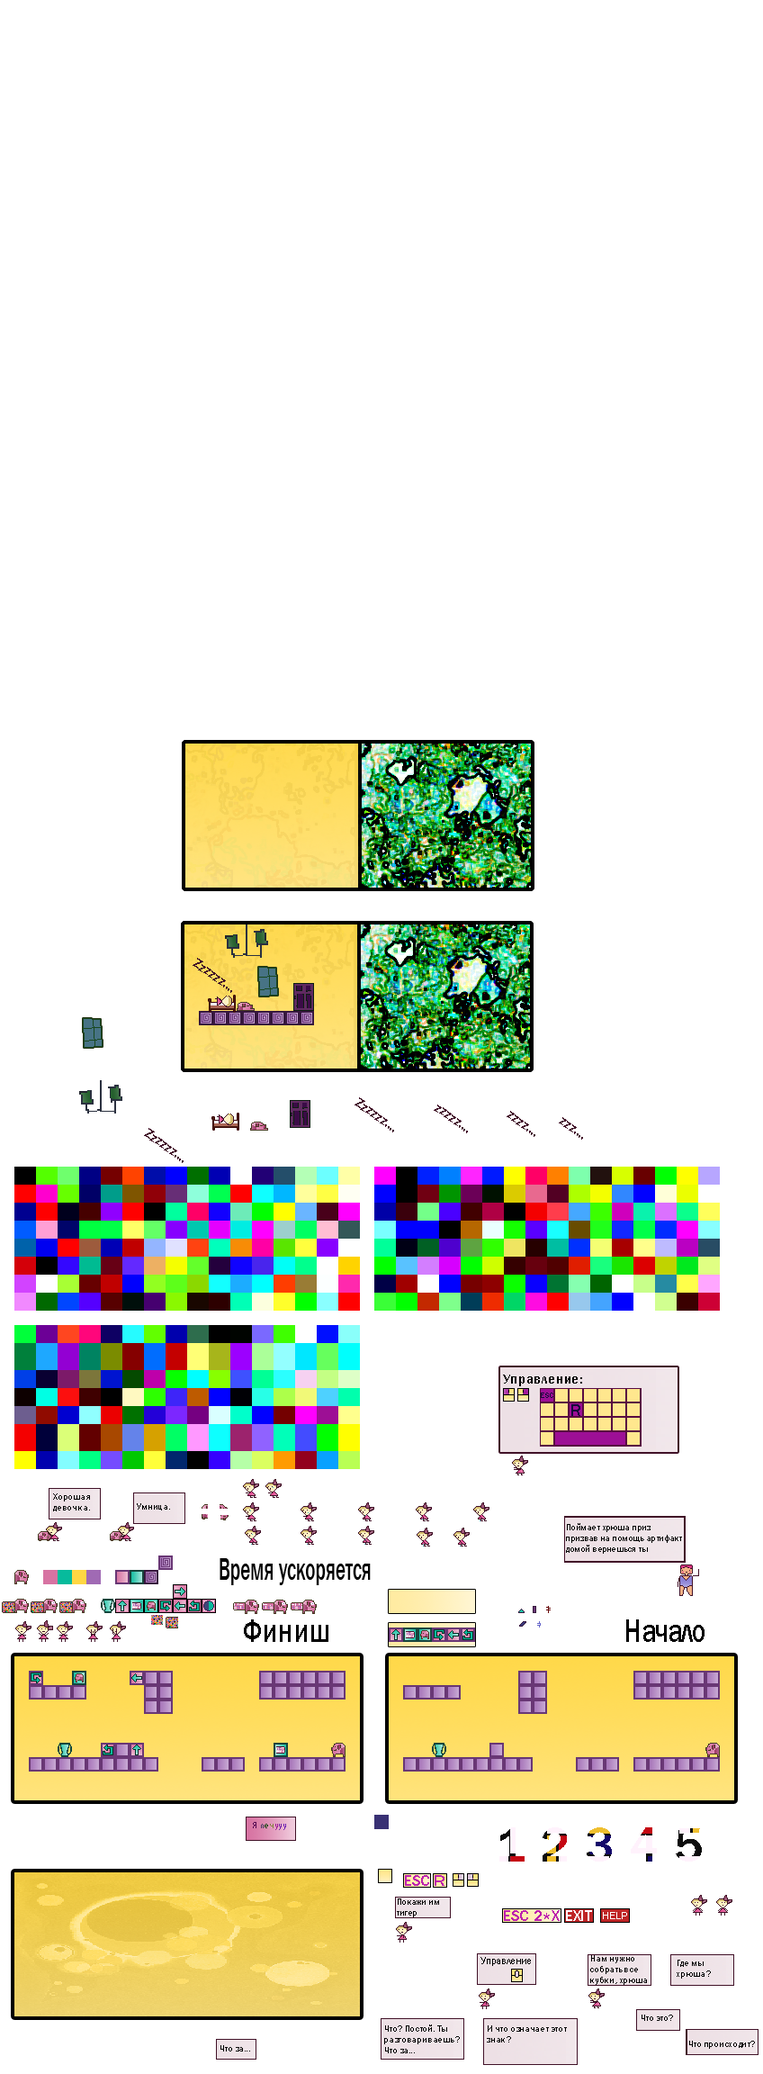
<style>
.page{position:relative;width:763px;height:2074px;background:#ffffff}
.page>*{position:absolute;margin:0}
.t1{font:12.7px "FranklinGothic-Medium";color:#411228}
.t2{font:13.7px "FranklinGothic-Medium";color:#000000}
.t3{font:9px "FranklinGothic-Medium";color:#000000}
.t4{font:31.6px "FranklinGothic-Medium";color:#000000;scale:0.6 1}
.t5{font:32.9px "FranklinGothic-Medium";color:#000000;scale:0.8 1}
.t6{font:9px "FranklinGothic-Medium";color:#550b51}
.t7{font:9px "FranklinGothic-Medium";color:#463961}
.t8{font:9px "FranklinGothic-Medium";color:#17490f}
.t9{font:9px "FranklinGothic-Medium";color:#858440}
.t10{font:9px "FranklinGothic-Medium";color:#a01c98}
.t11{font:9px "FranklinGothic-Medium";color:#7223a9}
.t12{font:9px "FranklinGothic-Medium";color:#6c20b3}
.t13{font:10.4px "FranklinGothic-Medium";color:#000000}
</style>
<div class="page">
<p class="t1" style="left:193px;top:958px;width:39px;height:35px;rotate:35deg">Zzzzzz....</p>
<p class="t1" style="left:144px;top:1128px;width:40px;height:35px;rotate:35deg">Zzzzzz....</p>
<p class="t2" style="left:503px;top:1374px;width:79px;height:12px">Управление:</p>
<p class="t3" style="left:53px;top:1493px;width:37px;height:18px">Хорошая <br>девочка.</p>
<p class="t3" style="left:137px;top:1503px;width:33px;height:7px">Умница.</p>
<p class="t3" style="left:566px;top:1523px;width:116px;height:30px">Поймает хрюша приз<br>призвав на помощь артифакт<br>домой вернешься ты</p>
<p class="t4" style="left:220px;top:1558px;width:151px;height:27px">Время ускоряется</p>
<p class="t5" style="left:244px;top:1619px;width:84px;height:23px">Финиш</p>
<p class="t5" style="left:626px;top:1619px;width:79px;height:23px">Начало</p>
<p class="t6" style="left:253px;top:1822px;width:33px;height:8px">Я <span class="t7">л</span><span class="t8">е</span><span class="t9">ч</span><span class="t10">у</span><span class="t11">у</span><span class="t12">у</span></p>
<p class="t3" style="left:397px;top:1898px;width:42px;height:19px">Покажи им <br>тигер</p>
<p class="t13" style="left:481px;top:1957px;width:50px;height:9px">Управление</p>
<p class="t3" style="left:590px;top:1955px;width:57px;height:29px">Нам нужно<br>собрать все <br>кубки, хрюша</p>
<p class="t3" style="left:677px;top:1959px;width:34px;height:19px">Где мы <br>хрюша?</p>
<p class="t3" style="left:642px;top:2014px;width:31px;height:6px">Что это?</p>
<p class="t3" style="left:384px;top:2024px;width:76px;height:29px">Что? Постой. Ты<br>разговариваешь?<br>Что за...</p>
<p class="t3" style="left:487px;top:2025px;width:80px;height:17px">И что означает этот<br>знак?</p>
<p class="t3" style="left:220px;top:2045px;width:30px;height:6px">Что за...</p>
<p class="t3" style="left:689px;top:2040px;width:66px;height:8px">Что происходит?</p>
</div>
